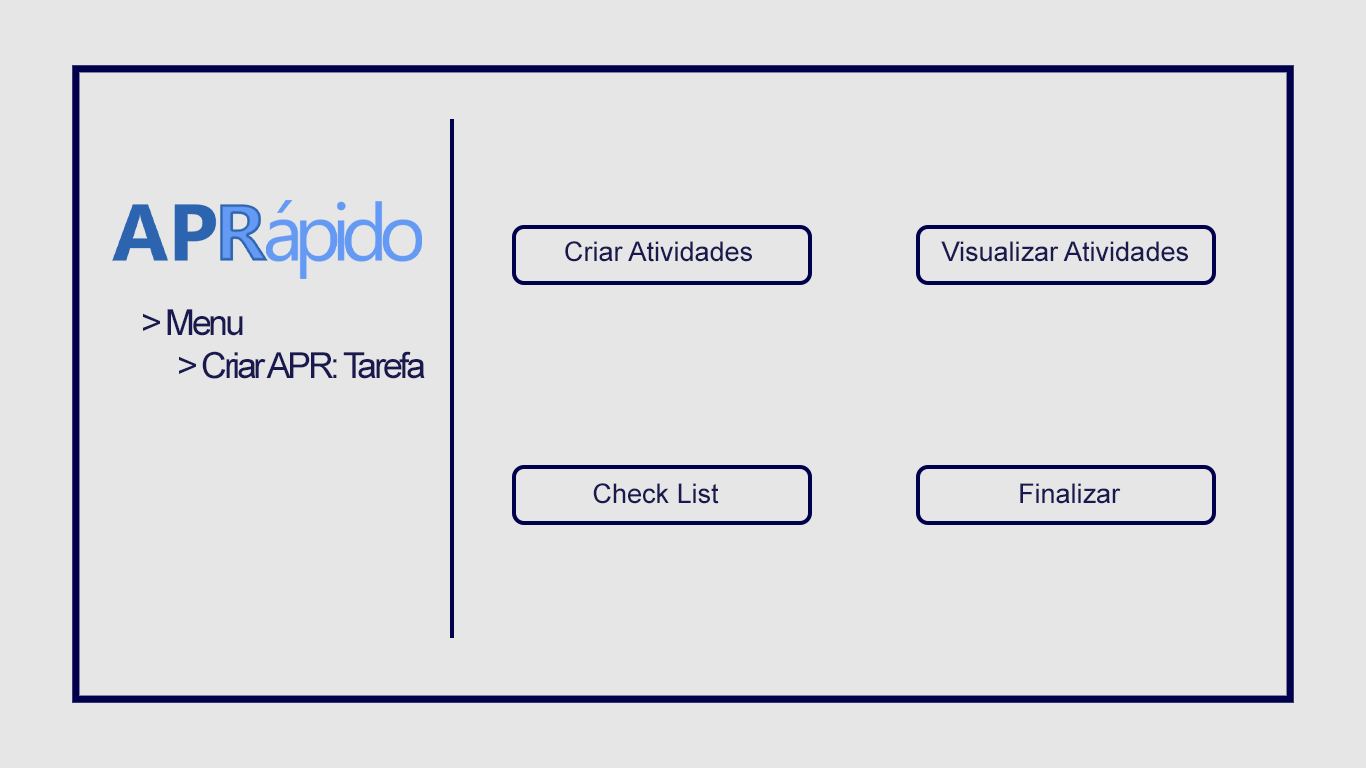
<style>
.page{position:relative;width:1366px;height:768px;background:#e6e6e6}
.page>*{position:absolute;margin:0}
.t1{font:27px "ArialMT";color:#19194f}
.t2{font:36px "ArialMT";letter-spacing:-0.095em;color:#19194f}
</style>
<div class="page">
<p class="t1" style="left:565px;top:241px;width:187px;height:21px">Criar Atividades</p>
<p class="t1" style="left:941px;top:241px;width:247px;height:21px">Visualizar Atividades</p>
<p class="t2" style="left:143px;top:309px;width:282px;height:70px">&gt; Menu<br> &gt; Criar APR: Tarefa</p>
<p class="t1" style="left:593px;top:483px;width:126px;height:21px">Check List</p>
<p class="t1" style="left:1020px;top:483px;width:101px;height:21px">Finalizar</p>
</div>
